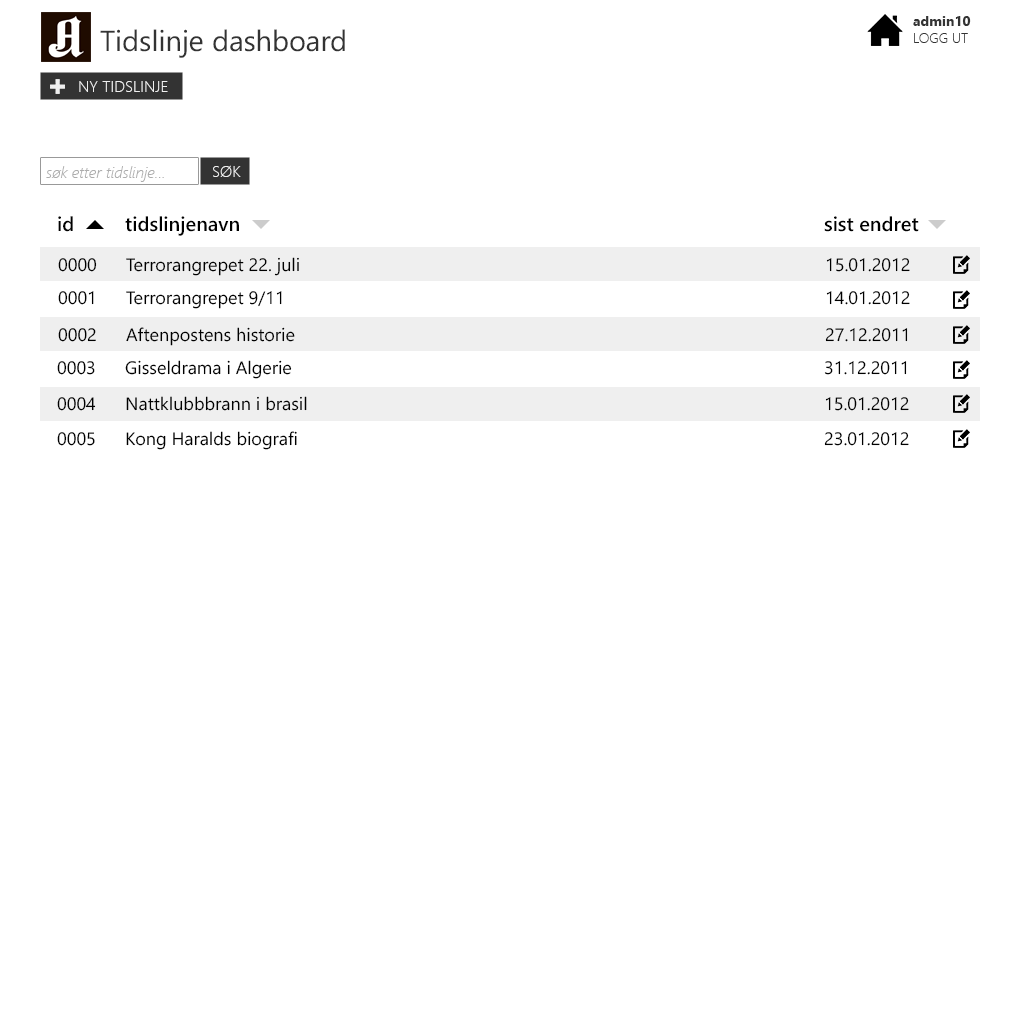
<style>
.page{position:relative;width:1020px;height:1020px;background:#ffffff}
.page>*{position:absolute;margin:0}
.t1{font:14px "SegoeUI-Bold";color:#333333}
.t2{font:29px "SegoeUI";color:#333333}
.t3{font:14px "SegoeUI-Light";color:#333333}
.t4{font:16px "SegoeUI-Light";color:#efefef}
.t5{font:16px "SegoeUI-LightItalic";color:#adadad}
.t6{font:20px "SegoeUI-Semibold";color:#000000}
.t7{font:18px "SegoeUI";color:#000000}
</style>
<div class="page">
<p class="t1" style="left:913px;top:16px;width:58px;height:10px">admin10</p>
<p class="t2" style="left:100px;top:29px;width:245px;height:29px">Tidslinje dashboard</p>
<p class="t3" style="left:914px;top:33px;width:54px;height:10px">LOGG UT</p>
<p class="t4" style="left:79px;top:81px;width:89px;height:11px">NY TIDSLINJE</p>
<p class="t5" style="left:46px;top:166px;width:118px;height:16px">søk etter tidslinje...</p>
<p class="t4" style="left:213px;top:165px;width:28px;height:12px">SØK</p>
<p class="t6" style="left:58px;top:216px;width:15px;height:16px">id</p>
<p class="t6" style="left:125px;top:216px;width:114px;height:20px">tidslinjenavn</p>
<p class="t6" style="left:824px;top:216px;width:95px;height:16px">sist endret</p>
<p class="t7" style="left:126px;top:257px;width:173px;height:19px">Terrorangrepet 22. juli</p>
<p class="t7" style="left:58px;top:258px;width:39px;height:14px">0000</p>
<p class="t7" style="left:826px;top:258px;width:84px;height:14px">15.01.2012</p>
<p class="t7" style="left:58px;top:291px;width:36px;height:14px">0001</p>
<p class="t7" style="left:126px;top:291px;width:156px;height:18px">Terrorangrepet 9/11</p>
<p class="t7" style="left:826px;top:291px;width:84px;height:14px">14.01.2012</p>
<p class="t7" style="left:58px;top:328px;width:38px;height:14px">0002</p>
<p class="t7" style="left:126px;top:327px;width:169px;height:19px">Aftenpostens historie</p>
<p class="t7" style="left:825px;top:328px;width:83px;height:14px">27.12.2011</p>
<p class="t7" style="left:57px;top:361px;width:38px;height:14px">0003</p>
<p class="t7" style="left:125px;top:360px;width:167px;height:19px">Gisseldrama i Algerie</p>
<p class="t7" style="left:824px;top:361px;width:83px;height:14px">31.12.2011</p>
<p class="t7" style="left:57px;top:397px;width:39px;height:14px">0004</p>
<p class="t7" style="left:126px;top:396px;width:181px;height:15px">Nattklubbbrann i brasil</p>
<p class="t7" style="left:825px;top:397px;width:84px;height:14px">15.01.2012</p>
<p class="t7" style="left:57px;top:432px;width:38px;height:14px">0005</p>
<p class="t7" style="left:126px;top:431px;width:171px;height:19px">Kong Haralds biografi</p>
<p class="t7" style="left:824px;top:432px;width:85px;height:14px">23.01.2012</p>
</div>
